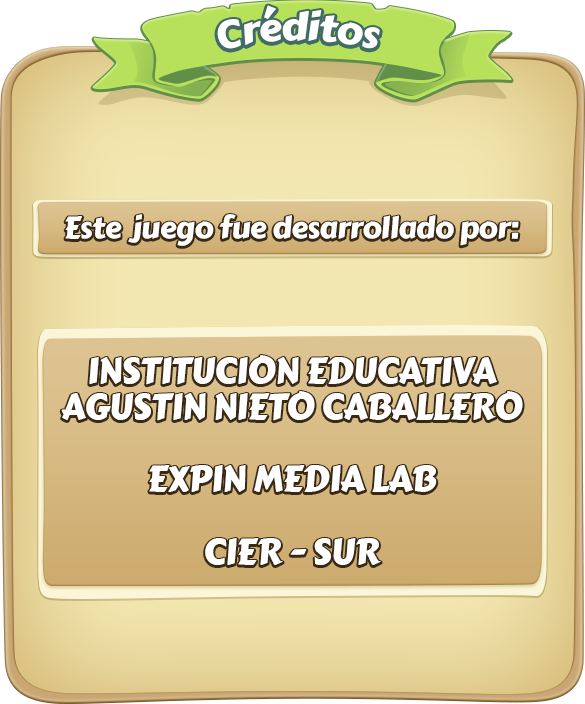
<style>
.page{position:relative;width:585px;height:704px}
.page>*{position:absolute;margin:0}
.t1{font:38px "CarterOne";letter-spacing:-0.02em;color:#ffffff}
.t2{font:36px/36.2px "CarterOne";letter-spacing:-0.02em;color:#ffffff}
.t3{font:30px/36.2px "CarterOne";letter-spacing:-0.02em;color:#ffffff}
</style>
<div class="page">
<p class="t1" style="left:217px;top:5px;width:163px;height:44px">Créditos</p>
<p class="t2" style="left:61px;top:214px;width:462px;height:351px;text-align:center"><span class="t3">Este  juego fue desarrollado por:<br><br><br><br></span>INSTITUCION EDUCATIVA<br>AGUSTIN NIETO CABALLERO<br><br>EXPIN MEDIA LAB<br><br>CIER - SUR</p>
</div>
